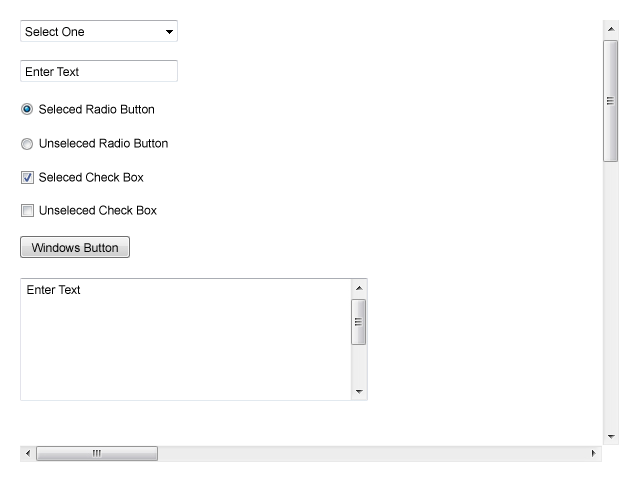
<style>
.page{position:relative;width:640px;height:480px;background:#ffffff}
.page>*{position:absolute;margin:0}
.t1{font:12px "ArialMT";color:#000000}
</style>
<div class="page">
<p class="t1" style="left:25px;top:27px;width:59px;height:10px">Select One</p>
<p class="t1" style="left:26px;top:67px;width:53px;height:9px">Enter Text</p>
<p class="t1" style="left:39px;top:104px;width:115px;height:10px">Seleced Radio Button</p>
<p class="t1" style="left:39px;top:138px;width:129px;height:10px">Unseleced Radio Button</p>
<p class="t1" style="left:39px;top:172px;width:105px;height:10px">Seleced Check Box</p>
<p class="t1" style="left:39px;top:205px;width:118px;height:10px">Unseleced Check Box</p>
<p class="t1" style="left:31px;top:243px;width:87px;height:9px">Windows Button</p>
<p class="t1" style="left:27px;top:285px;width:54px;height:9px">Enter Text</p>
</div>
